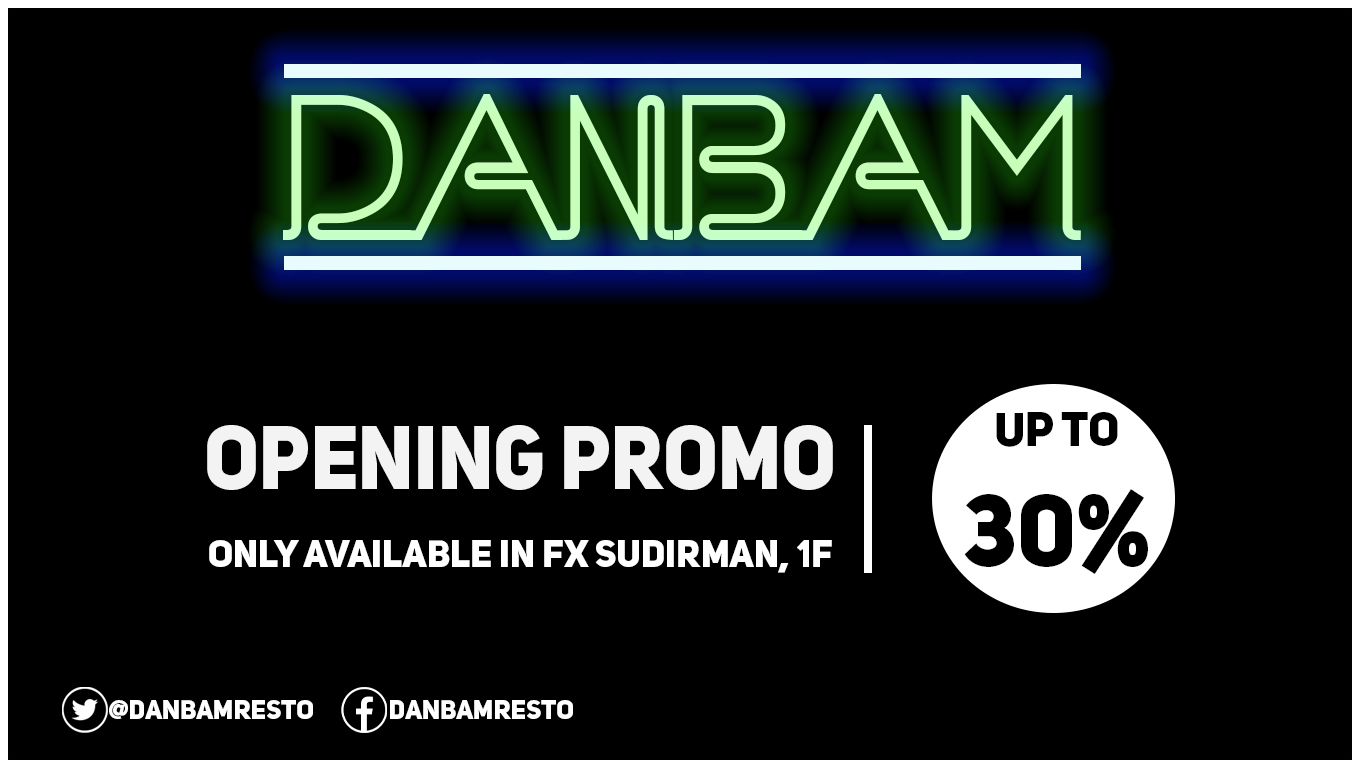
<style>
.page{position:relative;width:1360px;height:768px;background:#000000}
.page>*{position:absolute;margin:0}
.t1{font:47px "UniSansHeavyCAPS";color:#000000}
.t2{font:100px "UniSansHeavyCAPS";color:#000000}
.t3{font:88.9px "UniSansHeavyCAPS";color:#ffffff;scale:0.92 1}
.t4{font:37.6px "UniSansHeavyCAPS";color:#ffffff}
.t5{font:26.5px "UniSansHeavyCAPS";color:#ffffff}
</style>
<div class="page">
<p class="t1" style="left:964px;top:412px;width:184px;height:162px;text-align:center">up to<br><span class="t2">30%</span></p>
<p class="t3" style="left:207px;top:425px;width:626px;height:65px;opacity:0.93">OPENING PROMO</p>
<p class="t4" style="left:209px;top:540px;width:623px;height:33px">ONLY AVAILABLE IN FX Sudirman, 1F</p>
<p class="t5" style="left:109px;top:700px;width:204px;height:19px">@danbamresto</p>
<p class="t5" style="left:390px;top:700px;width:183px;height:19px">danbamresto</p>
</div>
